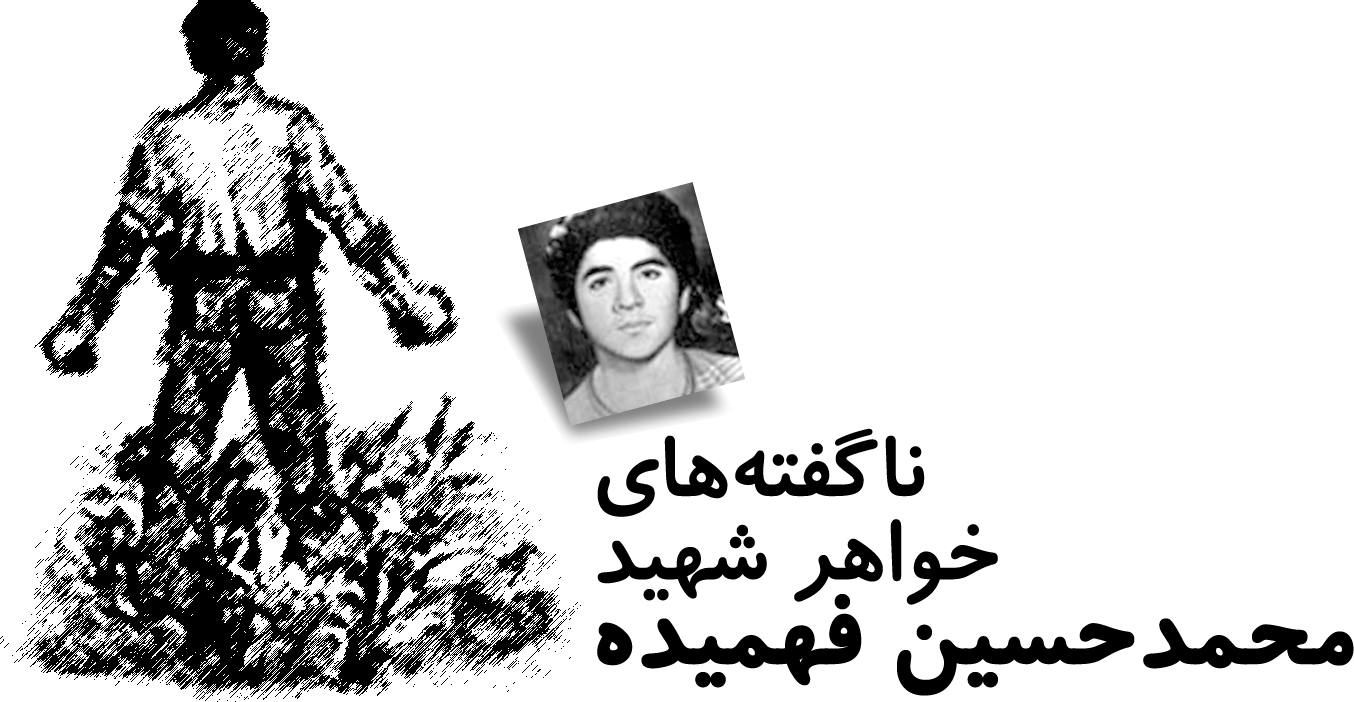
<style>
.page{position:relative;width:1354px;height:702px;background:#ffffff}
.page>*{position:absolute;margin:0}
.t1{font:100px/83.3px "BKoodakBold";color:#000000}
.t2{font:111.1px/83.3px "BKoodakBold";color:#000000;font-weight:bold}
</style>
<div class="page">
<p class="t1" style="left:597px;top:428px;width:757px;height:268px;text-align:right">ناگفته‌هاي<br>خواهر شهيد<br> <span class="t2">محمدحسين فهميده</span></p>
</div>
